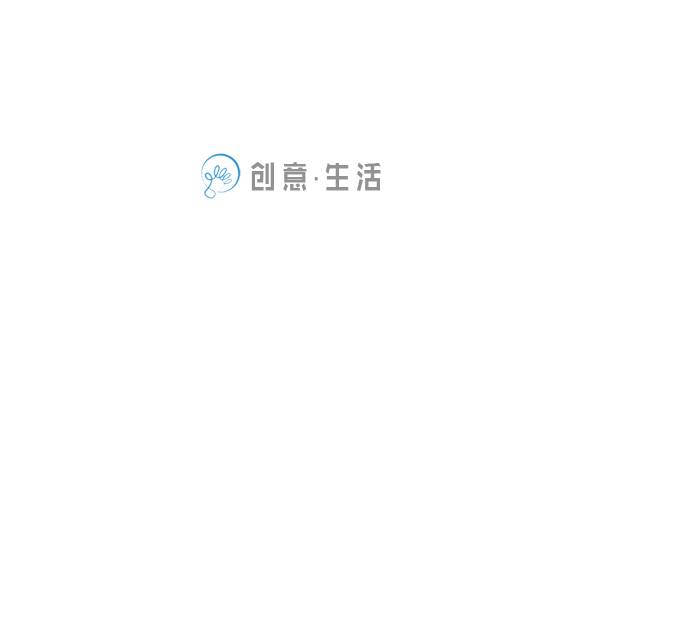
<style>
.page{position:relative;width:684px;height:638px;background:#ffffff}
.page>*{position:absolute;margin:0}
.t1{font:33.8px "ZHSRXT--GBK1-0";letter-spacing:0.2em;color:#929294;font-weight:bold;scale:0.77 1}
</style>
<div class="page">
<p class="t1" style="left:251px;top:162px;width:130px;height:29px">创意·生活</p>
</div>
